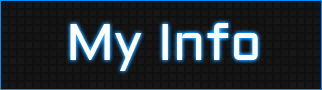
<style>
.page{position:relative;width:322px;height:90px;background:#101010}
.page>*{position:absolute;margin:0}
.t1{font:52px "Aldrich";color:#ffffff}
</style>
<div class="page">
<p class="t1" style="left:70px;top:23px;width:188px;height:48px">My Info</p>
</div>
